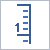
<style>
.page{position:relative;width:50px;height:50px;background:#ffffff}
.page>*{position:absolute;margin:0}
.t1{font:12px "ArialMT";letter-spacing:0.1em;color:#395c93;font-weight:bold}
</style>
<div class="page">
<p class="t1" style="left:15px;top:23px;width:4px;height:9px">1</p>
</div>
